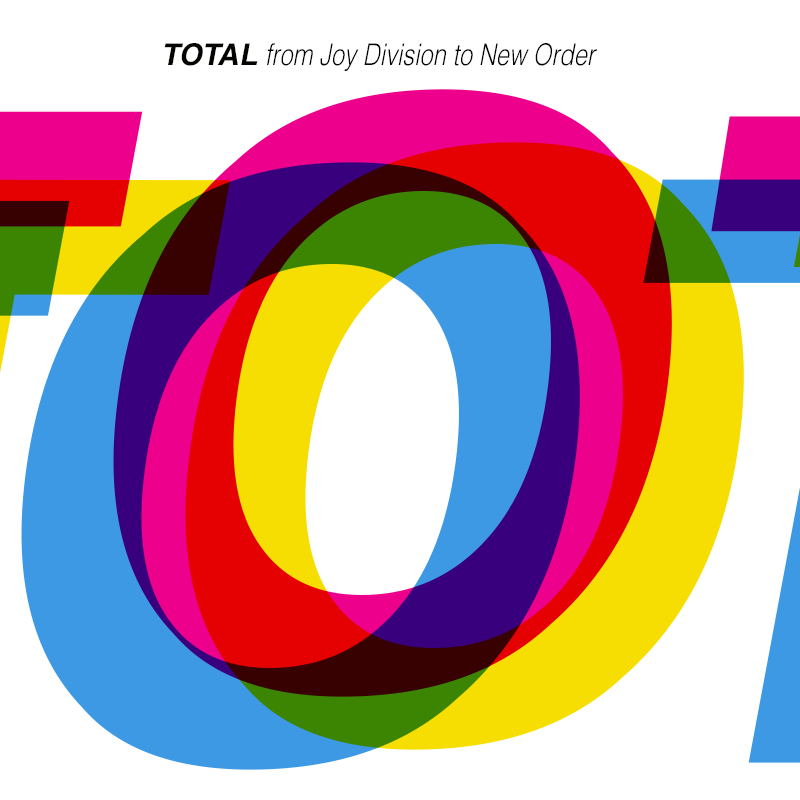
<style>
.page{position:relative;width:800px;height:800px;background:#ffffff}
.page>*{position:absolute;margin:0}
.t1{font:30.2px "Helvetica-Light";color:#020002;scale:0.79 1}
.t2{font:30.2px "Helvetica-Bold";color:#040400;text-transform:uppercase}
</style>
<div class="page">
<p class="t1" style="left:164px;top:43px;width:433px;height:28px"><span class="t2">Total </span>from Joy Division to New Order</p>
</div>
